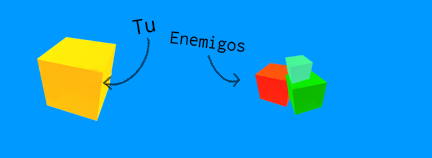
<style>
.page{position:relative;width:432px;height:158px;background:#0099ff}
.page>*{position:absolute;margin:0}
.t1{font:23.6px "Inconsolata";color:#000000}
.t2{font:19.2px "Inconsolata";color:#000000}
</style>
<div class="page">
<p class="t1" style="left:132px;top:18px;width:24px;height:17px;rotate:-9deg">Tu</p>
<p class="t2" style="left:170px;top:31px;width:75px;height:22px;rotate:6deg">Enemigos</p>
</div>
